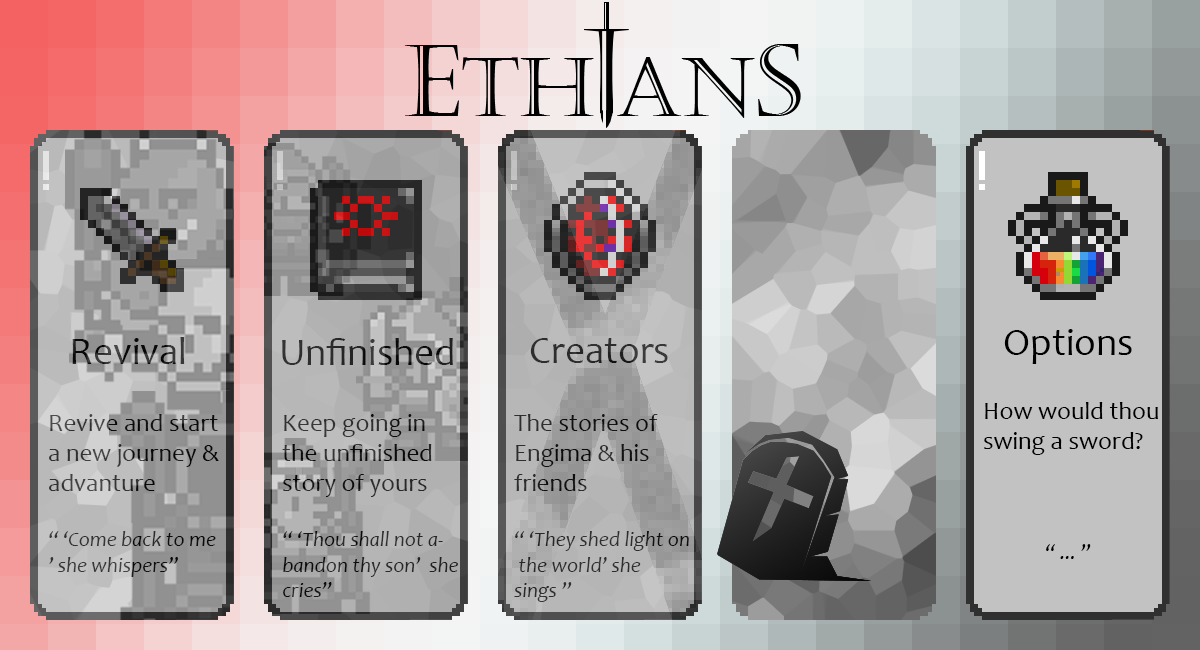
<style>
.page{position:relative;width:1200px;height:650px}
.page>*{position:absolute;margin:0}
.t1{font:39px "Candara";color:#000000}
.t2{font:39px "Candara"}
.t3{font:39px "Candara";color:#272727}
.t4{font:39px "Candara";color:#2e2e2e}
.t5{font:25px "Candara"}
.t6{font:21px "Candara-Italic"}
.t7{font:25px "Candara";color:#000000}
.t8{font:21px "Candara-Italic";color:#000000}
</style>
<div class="page">
<p class="t1" style="left:1004px;top:329px;width:128px;height:35px">Options</p>
<p class="t2" style="left:72px;top:337px;width:113px;height:27px">Revival</p>
<p class="t3" style="left:282px;top:338px;width:171px;height:27px">Unfinished</p>
<p class="t4" style="left:530px;top:338px;width:138px;height:25px">Creators</p>
<p class="t5" style="left:49px;top:414px;width:170px;height:163px">Revive and start<br>a new journey &amp;<br>advanture<br><br><span class="t6">‘‘ ‘Come back to me<br>’ she whispers”</span></p>
<p class="t6" style="left:282px;top:414px;width:176px;height:183px"><span class="t5">Keep going in <br>the unfinished<br>story of yours<br><br></span>‘‘ ‘Thou shall not a-<br>bandon thy son’  she <br>cries”</p>
<p class="t6" style="left:514px;top:414px;width:175px;height:188px"><span class="t5">The stories of <br>Engima &amp; his<br>friends<br><br></span>‘‘ ‘They shed light on<br> the world’ she <br>sings ”</p>
<p class="t7" style="left:984px;top:402px;width:174px;height:157px">How would thou<br>swing a sword?<br><br><br><span class="t8">      <br>        “ ... ”</span></p>
</div>
